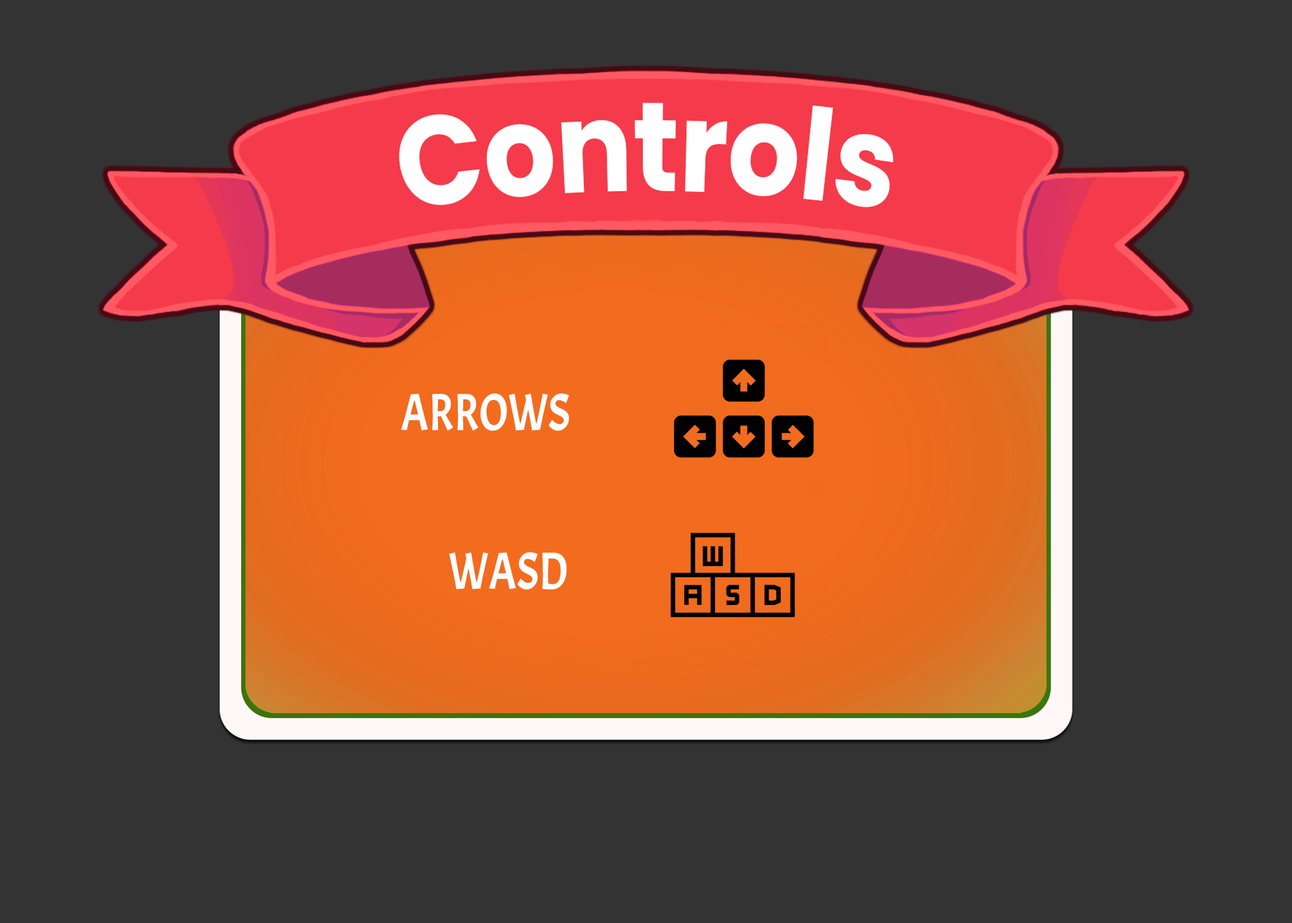
<style>
.page{position:relative;width:1292px;height:923px;background:#333333}
.page>*{position:absolute;margin:0}
.t1{font:52.3px "Acme-Regular";color:#ffffff;scale:0.83 1}
</style>
<div class="page">
<p class="t1" style="left:401px;top:393px;width:168px;height:38px">ARROWS</p>
<p class="t1" style="left:449px;top:552px;width:118px;height:37px">WASD</p>
</div>
